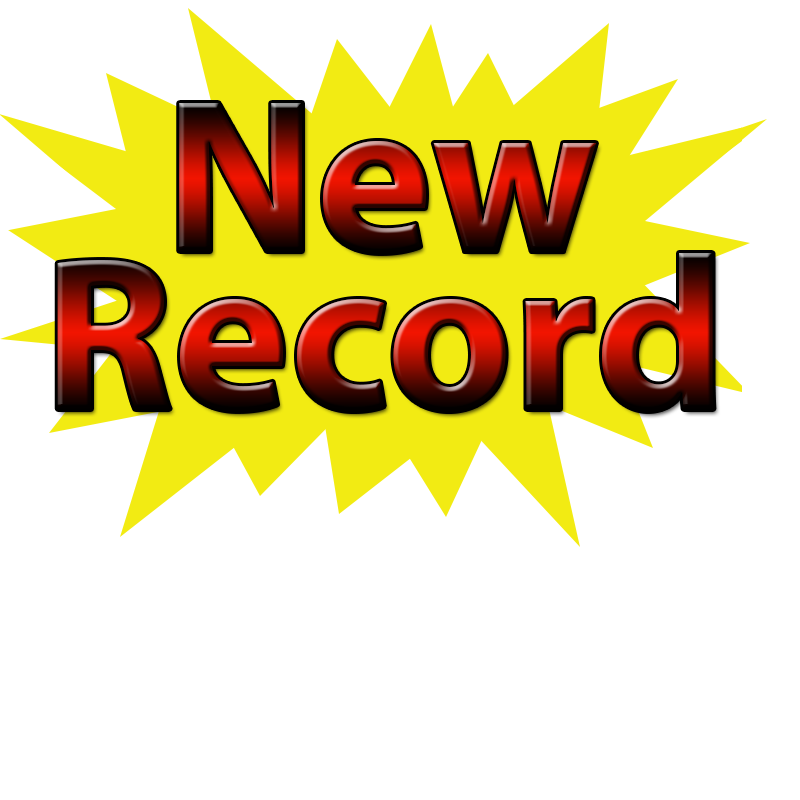
<style>
.page{position:relative;width:800px;height:800px;background:#ffffff}
.page>*{position:absolute;margin:0}
.t1{font:220px "MyriadPro-Bold"}
</style>
<div class="page">
<p class="t1" style="left:179px;top:103px;width:417px;height:150px">New</p>
<p class="t1" style="left:57px;top:253px;width:657px;height:159px">Record</p>
</div>
